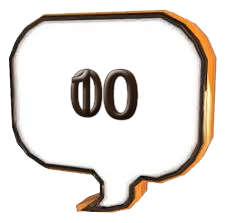
<style>
.page{position:relative;width:226px;height:223px;background:#ffffff}
.page>*{position:absolute;margin:0}
.t1{font:64px "MicrosoftSansSerif";color:#362418}
</style>
<div class="page">
<p class="t1" style="left:71px;top:69px;width:67px;height:51px;rotate:2deg">00</p>
<p class="t1" style="left:72px;top:69px;width:63px;height:51px;rotate:2deg">10</p>
</div>
